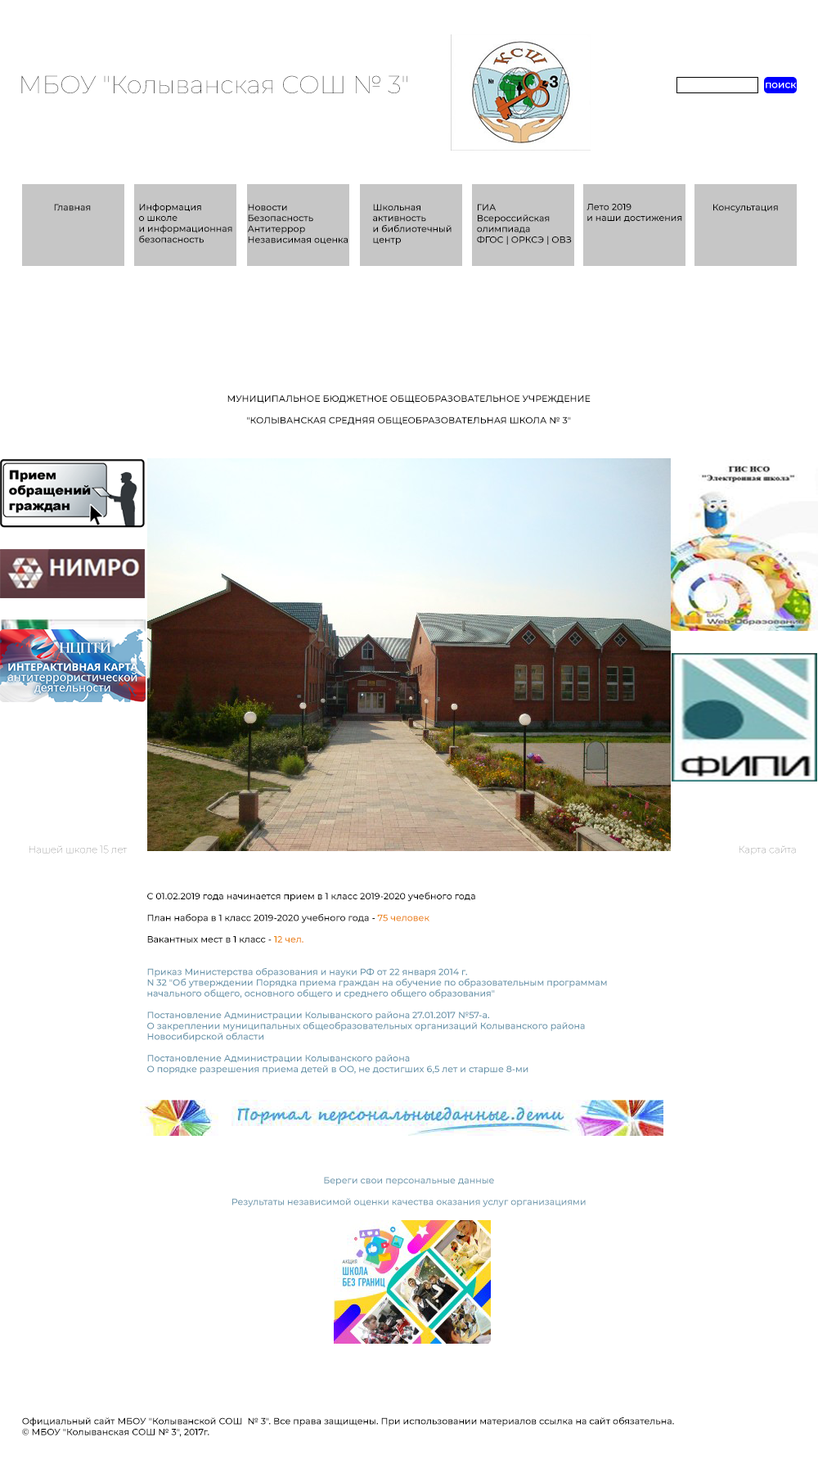
<style>
.page{position:relative;width:818px;height:1473px;background:#ffffff}
.page>*{position:absolute;margin:0}
.t1{font:24.5px "Montserrat-Thin";color:#000000}
.t2{font:32.7px "Montserrat-Thin";color:#000000}
.t3{font:9.8px "Montserrat-Medium";color:#ffffff}
.t4{font:9px "Montserrat-Medium";color:#000000}
.t5{font:9px "Montserrat-Medium";color:#6592a9}
.t6{font:9px "Montserrat-Medium";color:#eb8206}
.t7{font:9px "Montserrat-Medium";color:#719aaf}
</style>
<div class="page">
<p class="t1" style="left:21px;top:75px;width:386px;height:18px"><span class="t2"><br></span>МБОУ "Колыванская СОШ № 3"</p>
<p class="t3" style="left:766px;top:83px;width:31px;height:5px">поиск</p>
<p class="t4" style="left:54px;top:204px;width:37px;height:7px">Главная</p>
<p class="t4" style="left:139px;top:203px;width:93px;height:40px">Информация <br>о школе <br>и информационная <br>безопасность</p>
<p class="t4" style="left:247px;top:204px;width:101px;height:40px">Новости <br>Безопасность <br>Антитеррор <br>Независимая оценка</p>
<p class="t4" style="left:373px;top:204px;width:79px;height:41px">Школьная <br>активность <br>и библиотечный <br>центр</p>
<p class="t4" style="left:477px;top:204px;width:95px;height:41px">ГИА  <br>Всероссийская <br>олимпиада <br>ФГОС | ОРКСЭ | ОВЗ</p>
<p class="t4" style="left:587px;top:204px;width:95px;height:19px">Лето 2019 <br>и наши достижения</p>
<p class="t4" style="left:713px;top:204px;width:65px;height:9px">Консультация</p>
<p class="t4" style="left:227px;top:395px;width:364px;height:30px">МУНИЦИПАЛЬНОЕ БЮДЖЕТНОЕ ОБЩЕОБРАЗОВАТЕЛЬНОЕ УЧРЕЖДЕНИЕ<br><br>        "КОЛЫВАНСКАЯ СРЕДНЯЯ ОБЩЕОБРАЗОВАТЕЛЬНАЯ ШКОЛА № 3"</p>
<p class="t5" style="left:147px;top:892px;width:460px;height:182px"><span class="t4">C 01.02.2019 года начинается прием в 1 класс 2019-2020 учебного года<br><br>План набора в 1 класс 2019-2020 учебного года - </span><span class="t6">75 человек<br></span><span class="t4"><br>Вакантных мест в 1 класс -</span><span class="t6"> 12 чел. <br><br><br></span>Приказ Министерства образования и науки РФ от 22 января 2014 г. <br>N 32 "Об утверждении Порядка приема граждан на обучение по образовательным программам <br>начального общего, основного общего и среднего общего образования"<br><br>Постановление Администрации Колыванского района 27.01.2017 №57-а. <br>О закреплении муниципальных общеобразовательных организаций Колыванского района <br>Новосибирской области<br><br>Постановление Администрации Колыванского района <br>О порядке разрешения приема детей в ОО, не достигших 6,5 лет и старше 8-ми</p>
<p class="t7" style="left:232px;top:1177px;width:354px;height:30px">Береги свои персональные данные<br><br>Результаты независимой оценки качества оказания услуг организациями</p>
<p class="t4" style="left:22px;top:1416px;width:652px;height:21px">Официальный сайт МБОУ "Колыванской СОШ  № 3". Все права защищены. При использовании материалов ссылка на сайт обязательна. <br>© МБОУ "Колыванская СОШ № 3", 2017г.</p>
</div>
